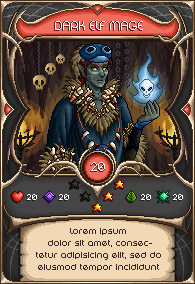
<style>
.page{position:relative;width:195px;height:284px}
.page>*{position:absolute;margin:0}
.t1{font:14px "DigitalDisco-Thin";color:#5b1d1d;text-transform:uppercase}
.t2{font:14px "DigitalDisco-Thin";color:#ffffff;text-transform:uppercase}
.t3{font:9px "DigitalDisco-Thin";color:#ffffff;text-transform:uppercase}
.t4{font:10px "DigitalDisco-Thin";color:#3f2222}
</style>
<div class="page">
<p class="t1" style="left:54px;top:21px;width:88px;height:9px">dark elf mage</p>
<p class="t2" style="left:55px;top:21px;width:88px;height:9px">dark elf mage</p>
<p class="t1" style="left:91px;top:163px;width:14px;height:9px">20</p>
<p class="t2" style="left:91px;top:162px;width:14px;height:9px">20</p>
<p class="t3" style="left:27px;top:194px;width:10px;height:6px">20</p>
<p class="t3" style="left:59px;top:194px;width:10px;height:6px">20</p>
<p class="t3" style="left:141px;top:194px;width:10px;height:6px">20</p>
<p class="t3" style="left:173px;top:194px;width:10px;height:6px">20</p>
<p class="t4" style="left:36px;top:228px;width:125px;height:43px;text-align:center">Lorem ipsum dolor sit amet, consectetur adipisicing elit, sed do eiusmod tempor incididunt</p>
</div>
